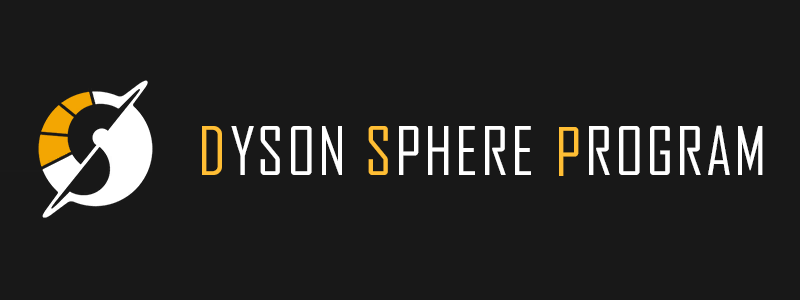
<style>
.page{position:relative;width:800px;height:300px;background:#181818}
.page>*{position:absolute;margin:0}
.t1{font:64.1px "AgencyFB-Reg";letter-spacing:0.05em;color:#ffbe34}
.t2{font:64.1px "AgencyFB-Reg";letter-spacing:0.04em;color:#ffffff}
.t3{font:64.1px "AgencyFB-Reg";letter-spacing:0.044em;color:#ffbe34}
</style>
<div class="page">
<p class="t1" style="left:202px;top:126px;width:20px;height:49px">D</p>
<p class="t2" style="left:231px;top:126px;width:111px;height:49px">YSON</p>
<p class="t1" style="left:368px;top:126px;width:20px;height:49px">S</p>
<p class="t2" style="left:399px;top:126px;width:132px;height:49px">PHERE</p>
<p class="t2" style="left:589px;top:125px;width:174px;height:50px">ROGRAM</p>
<p class="t3" style="left:559px;top:127px;width:20px;height:49px">P</p>
</div>
